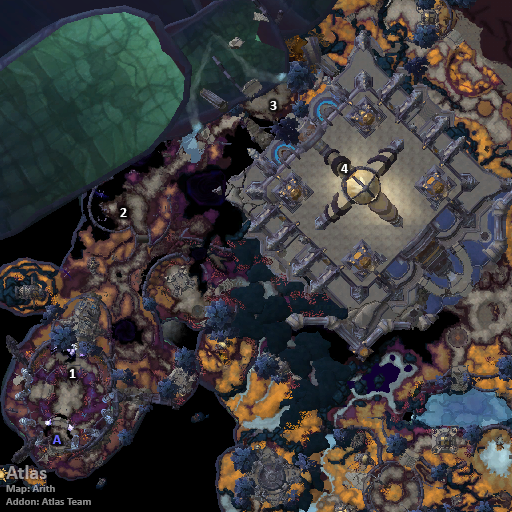
<style>
.page{position:relative;width:512px;height:512px}
.page>*{position:absolute;margin:0}
.t1{font:14px "Calibri-Bold";color:#ffffff}
.t2{font:14px "Calibri-Bold";color:#6666ff}
.t3{font:11px "Calibri-Bold";color:#909090}
.t4{font:20px "Calibri-Bold";color:#909090}
</style>
<div class="page">
<p class="t1" style="left:270px;top:101px;width:7px;height:9px">3</p>
<p class="t1" style="left:341px;top:164px;width:7px;height:9px">4</p>
<p class="t1" style="left:120px;top:208px;width:7px;height:9px">2</p>
<p class="t1" style="left:69px;top:369px;width:7px;height:9px">1</p>
<p class="t2" style="left:52px;top:435px;width:9px;height:9px">A</p>
<p class="t3" style="left:6px;top:465px;width:85px;height:40px"><span class="t4">Atlas<br></span>Map: Arith<br>Addon: Atlas Team</p>
</div>
